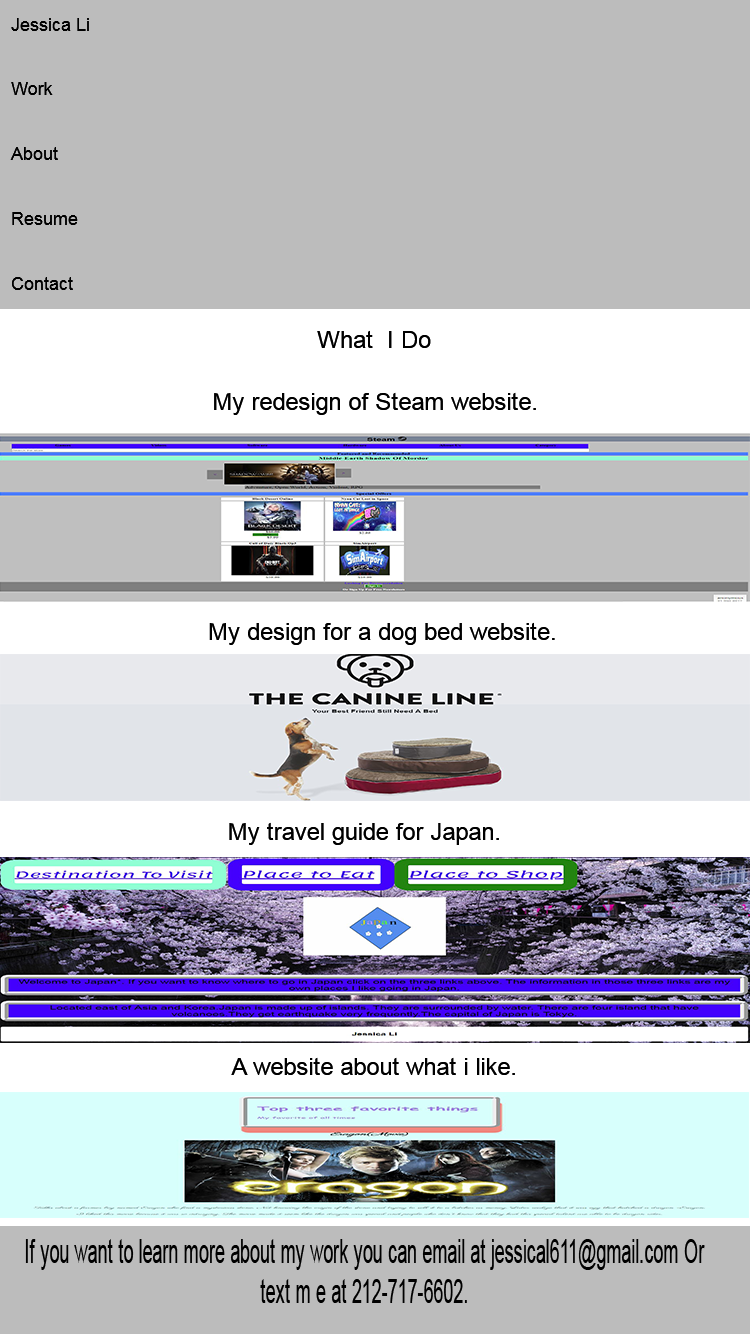
<style>
.page{position:relative;width:750px;height:1334px;background:#bcbcbc}
.page>*{position:absolute;margin:0}
.t1{font:18px "ArialMT";color:#000000}
.t2{font:24px "ArialMT";color:#000000}
.t3{font:33.2px "ArialMT";color:#000000;scale:0.55 1}
</style>
<div class="page">
<p class="t1" style="left:10px;top:18px;width:79px;height:272px">Jessica Li<br><br><br>Work<br><br><br>About<br><br><br>Resume<br><br><br>Contact</p>
<p class="t2" style="left:317px;top:330px;width:114px;height:18px">What  I Do</p>
<p class="t2" style="left:214px;top:392px;width:322px;height:23px">My redesign of Steam website.</p>
<p class="t2" style="left:209px;top:622px;width:346px;height:23px">My design for a dog bed website.</p>
<p class="t2" style="left:229px;top:822px;width:270px;height:23px">My travel guide for Japan.</p>
<p class="t2" style="left:231px;top:1057px;width:284px;height:18px">A website about what i like.</p>
<p class="t3" style="left:25px;top:1239px;width:680px;height:64px;text-align:center">If you want to learn more about my work you can email at jessical611@gmail.com Or text m e at 212-717-6602.</p>
</div>
